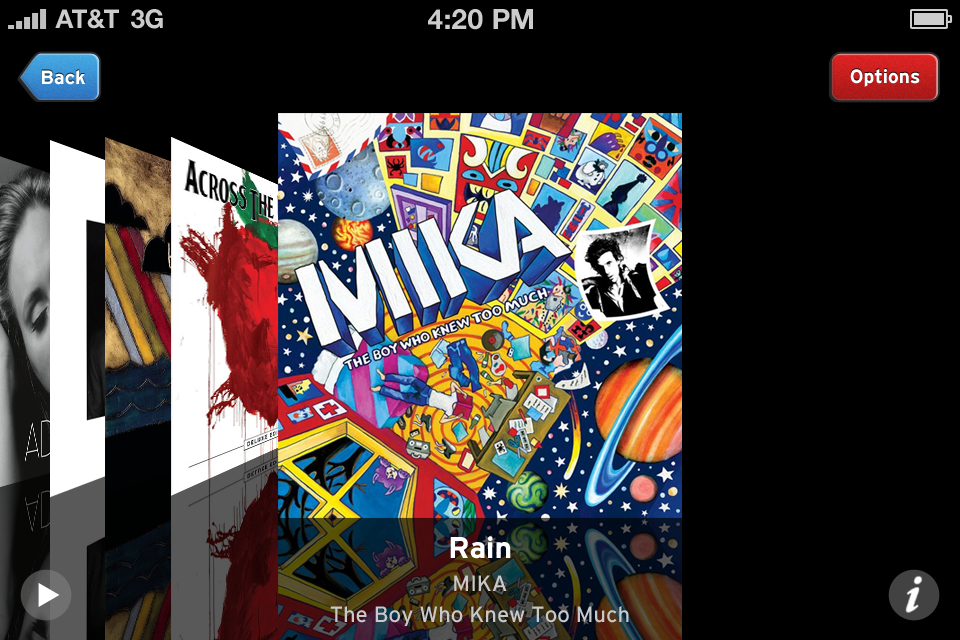
<style>
.page{position:relative;width:960px;height:640px;background:#000000}
.page>*{position:absolute;margin:0}
.t1{font:26px "HelveticaNeue-Bold";color:#cccccc;text-transform:uppercase}
.t2{font:28px "HelveticaNeue-Bold";color:#cccccc;text-transform:uppercase}
.t3{font:19.2px "Interstate-Bold";color:#ffffff}
.t4{font:30px "Interstate-Bold";color:#ffffff}
.t5{font:22px "Interstate-Regular";color:#c9c9c9}
</style>
<div class="page">
<p class="t1" style="left:55px;top:9px;width:64px;height:20px">AT&amp;T</p>
<p class="t1" style="left:131px;top:9px;width:32px;height:20px">3G</p>
<p class="t2" style="left:428px;top:9px;width:105px;height:21px">4:20 pM</p>
<p class="t3" style="left:42px;top:70px;width:43px;height:15px">Back</p>
<p class="t3" style="left:850px;top:69px;width:70px;height:18px">Options</p>
<p class="t4" style="left:450px;top:536px;width:61px;height:23px">Rain</p>
<p class="t5" style="left:454px;top:575px;width:53px;height:17px">MIKA</p>
<p class="t5" style="left:330px;top:606px;width:299px;height:20px">The Boy Who Knew Too Much</p>
</div>
